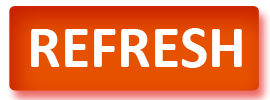
<style>
.page{position:relative;width:270px;height:100px;background:#ffffff}
.page>*{position:absolute;margin:0}
.t1{font:60px "Calibri-Bold";color:#ffffff}
</style>
<div class="page">
<p class="t1" style="left:31px;top:28px;width:211px;height:40px">REFRESH</p>
</div>
